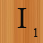
<style>
.page{position:relative;width:43px;height:43px}
.page>*{position:absolute;margin:0}
.t1{font:30px "TimesNewRomanPSMT";color:#0c0c0b}
.t2{font:12px "TimesNewRomanPSMT";color:#0c0c0b}
</style>
<div class="page">
<p class="t1" style="left:17px;top:8px;width:10px;height:20px">I</p>
<p class="t2" style="left:34px;top:28px;width:4px;height:9px">1</p>
</div>
